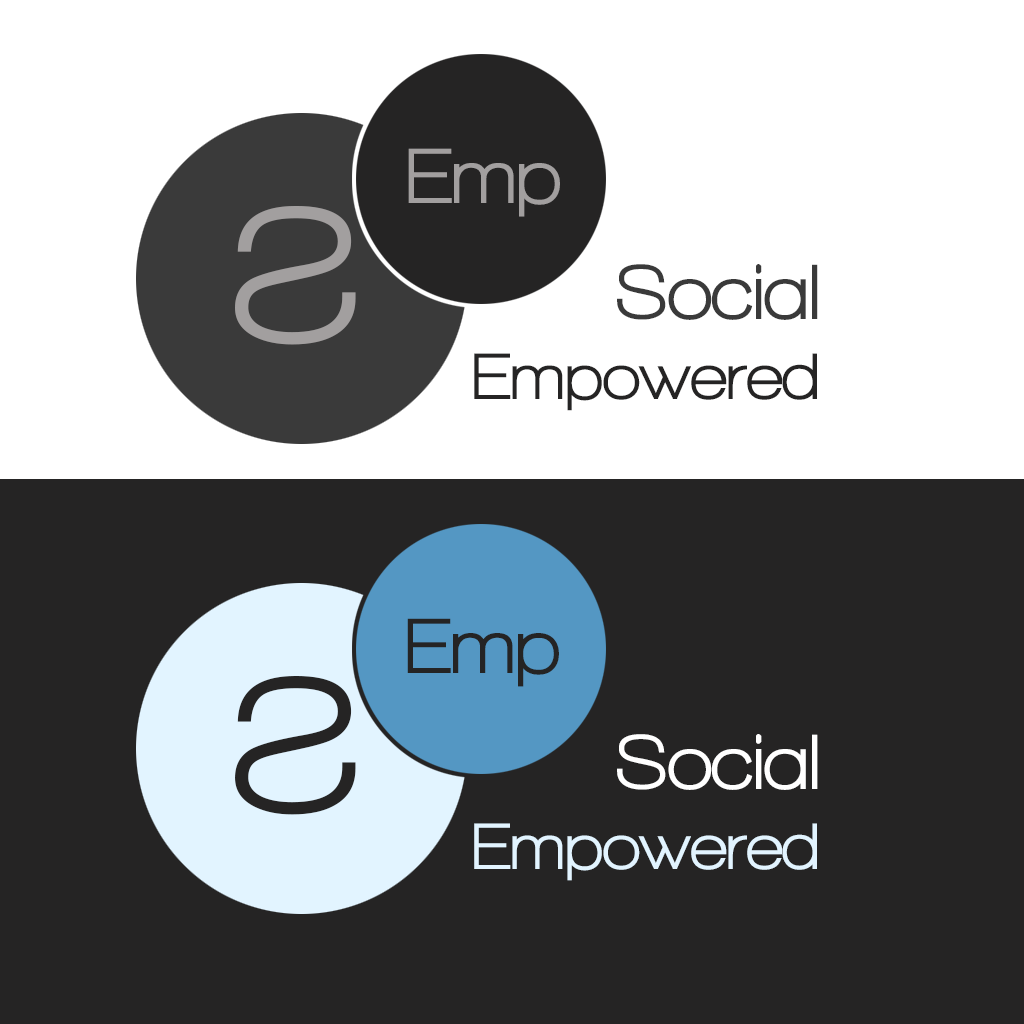
<style>
.page{position:relative;width:1024px;height:1024px;background:#252424}
.page>*{position:absolute;margin:0}
.t1{font:80px "WalkwayUltraBold";color:#a29f9f}
.t2{font:200px "WalkwayUltraBold";color:#a29f9f}
.t3{font:67px "WalkwayUltraBold";color:#252424}
.t4{font:80px "WalkwayUltraBold";color:#3a3a3a}
.t5{font:80px "WalkwayUltraBold";color:#252424}
.t6{font:200px "WalkwayUltraBold";color:#252424}
.t7{font:67px "WalkwayUltraBold";color:#e2f4ff}
.t8{font:80px "WalkwayUltraBold";color:#ffffff}
</style>
<div class="page">
<p class="t1" style="left:408px;top:148px;width:152px;height:69px">Emp</p>
<p class="t2" style="left:235px;top:206px;width:121px;height:139px;rotate:180deg">S</p>
<p class="t3" style="left:474px;top:264px;width:344px;height:147px"><span class="t1">     </span><span class="t4">Social<br></span>Empowered</p>
<p class="t5" style="left:407px;top:618px;width:152px;height:69px">Emp</p>
<p class="t6" style="left:235px;top:676px;width:121px;height:139px;rotate:180deg">S</p>
<p class="t7" style="left:474px;top:734px;width:344px;height:147px"><span class="t1">     </span><span class="t8">Social<br></span>Empowered</p>
</div>
